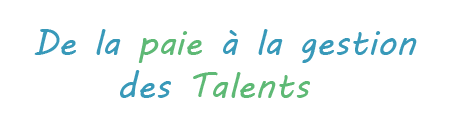
<style>
.page{position:relative;width:451px;height:127px;background:#ffffff}
.page>*{position:absolute;margin:0}
.t1{font:36px "MVBoli";color:#389aba}
.t2{font:36px "MVBoli";color:#5eb975}
</style>
<div class="page">
<p class="t1" style="left:34px;top:29px;width:383px;height:69px">De la<span class="t2"> paie </span>à la gestion<br>          des<span class="t2"> Talents</span></p>
</div>
